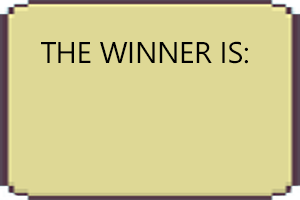
<style>
.page{position:relative;width:300px;height:200px;background:#ded895}
.page>*{position:absolute;margin:0}
.t1{font:30px "Gisha";letter-spacing:-0.01em;color:#000000;text-transform:uppercase}
</style>
<div class="page">
<p class="t1" style="left:41px;top:41px;width:207px;height:23px">The Winner is:</p>
</div>
